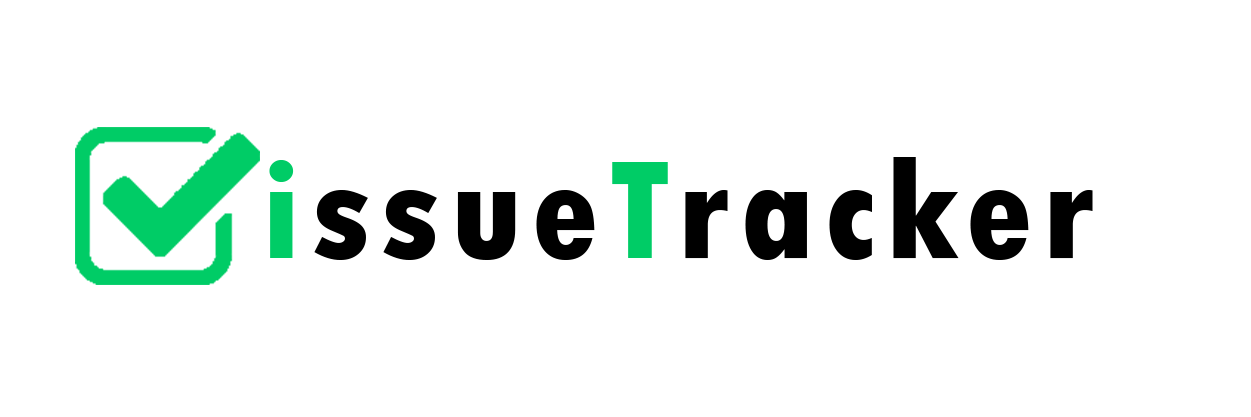
<style>
.page{position:relative;width:1251px;height:417px;background:#ffffff}
.page>*{position:absolute;margin:0}
.t1{font:147.1px "TwCenMT-CondensedExtraBold";letter-spacing:0.06em;color:#000000;scale:1.07 1}
.t2{font:147.1px "TwCenMT-CondensedExtraBold";letter-spacing:0.06em;color:#00cc66;scale:1.07 1}
</style>
<div class="page">
<p class="t1" style="left:269px;top:157px;width:824px;height:103px"><span class="t2">i</span>ssue<span class="t2">T</span>racker</p>
</div>
